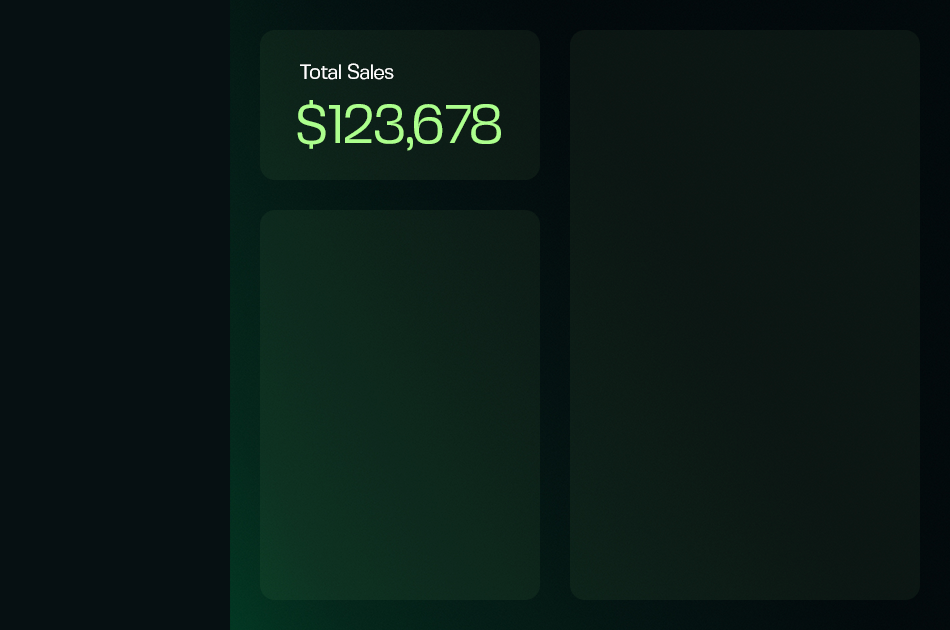
<style>
.page{position:relative;width:950px;height:630px;background:#061012}
.page>*{position:absolute;margin:0}
.t1{font:20.8px "FivoSansModern-Regular";letter-spacing:-0.05em;color:#ffffff}
.t2{font:54.2px "FivoSansModern-Regular";letter-spacing:-0.05em;color:#acff8d}
</style>
<div class="page">
<p class="t1" style="left:300px;top:63px;width:94px;height:17px">Total Sales</p>
<p class="t2" style="left:297px;top:100px;width:204px;height:51px">$123,678</p>
</div>
